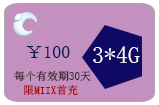
<style>
.page{position:relative;width:159px;height:105px;background:#c490bf}
.page>*{position:absolute;margin:0}
.t1{font:18px "SimSun";color:#091e54}
.t2{font:24px "SimSun";color:#fef9f9}
.t3{font:11px "SimSun";color:#352a2a}
.t4{font:11px "SimSun";color:#a40808}
</style>
<div class="page">
<p class="t1" style="left:26px;top:46px;width:44px;height:12px">￥100</p>
<p class="t2" style="left:93px;top:46px;width:47px;height:17px">3*4G</p>
<p class="t3" style="left:14px;top:70px;width:77px;height:12px">每个有效期30天</p>
<p class="t4" style="left:24px;top:84px;width:54px;height:12px">限MIIX首充</p>
</div>
